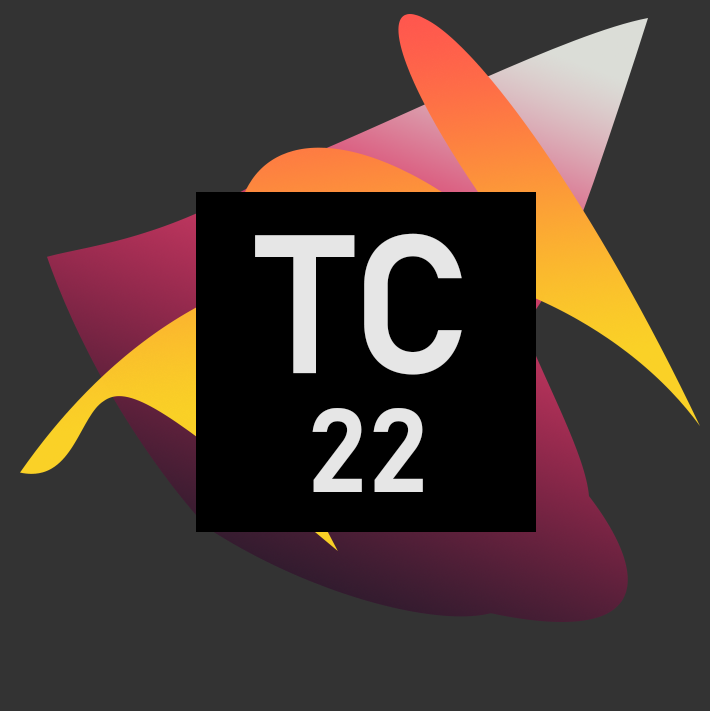
<style>
.page{position:relative;width:710px;height:711px;background:#333333}
.page>*{position:absolute;margin:0}
.t1{font:194.4px "Bahnschrift-SemiBold";color:#e6e6e6}
.t2{font:116.7px "Bahnschrift-SemiBold";color:#e6e6e6}
</style>
<div class="page">
<p class="t1" style="left:255px;top:233px;width:207px;height:142px">TC</p>
<p class="t2" style="left:312px;top:408px;width:111px;height:84px">22</p>
</div>
